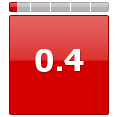
<style>
.page{position:relative;width:117px;height:117px;background:#d40000}
.page>*{position:absolute;margin:0}
.t1{font:36px "Colaborate-Bold";color:#ffffff;text-transform:uppercase}
</style>
<div class="page">
<p class="t1" style="left:35px;top:49px;width:49px;height:23px">0.4</p>
</div>
